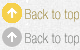
<style>
.page{position:relative;width:80px;height:50px}
.page>*{position:absolute;margin:0}
.t1{font:14px "HelveticaNeueLTStd-ThCn";letter-spacing:0.01em}
</style>
<div class="page">
<p class="t1" style="left:25px;top:9px;width:54px;height:13px">Back to top</p>
<p class="t1" style="left:25px;top:33px;width:54px;height:13px">Back to top</p>
</div>
